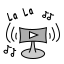
<style>
.page{position:relative;width:64px;height:64px;background:#ffffff}
.page>*{position:absolute;margin:0}
.t1{font:10.9px "ComicSansMS-Bold";letter-spacing:0.2em;color:#000000;scale:0.69 1}
</style>
<div class="page">
<p class="t1" style="left:7px;top:8px;width:27px;height:14px;rotate:-17deg">La La</p>
</div>
